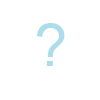
<style>
.page{position:relative;width:100px;height:100px;background:#ffffff}
.page>*{position:absolute;margin:0}
.t1{font:60px "ArialMT";color:#adddeb}
</style>
<div class="page">
<p class="t1" style="left:36px;top:23px;width:29px;height:43px">?</p>
</div>
